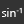
<style>
.page{position:relative;width:24px;height:24px;background:#333333}
.page>*{position:absolute;margin:0}
.t1{font:12px "SegoeUI";color:#ffffff}
</style>
<div class="page">
<p class="t1" style="left:2px;top:7px;width:20px;height:10px">sin-1</p>
</div>
